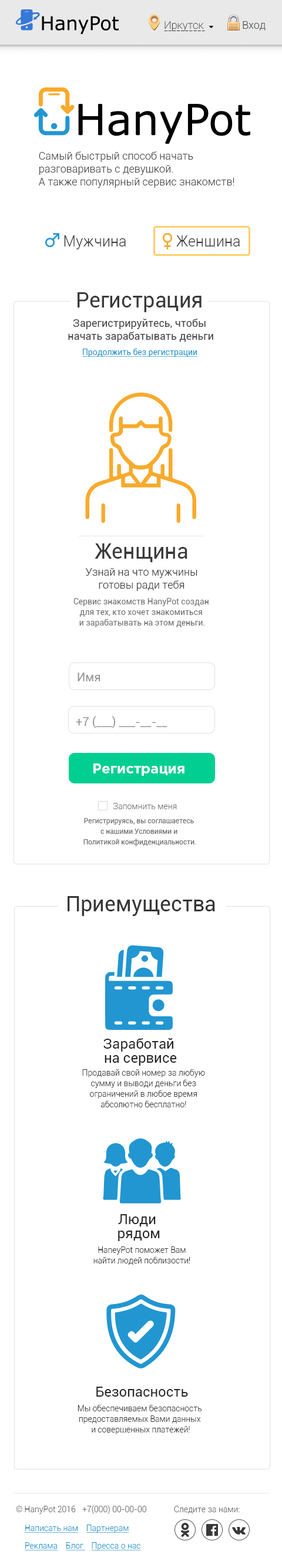
<style>
.page{position:relative;width:282px;height:1568px;background:#ffffff}
.page>*{position:absolute;margin:0}
.t1{font:10.6px/5.3px "Roboto-Thin";color:#393939}
.t2{font:10.6px "Roboto-Light";color:#525252}
.t3{font:10.6px "Roboto-Light";color:#464646}
.t4{font:14.8px "Roboto-Light";color:#3a3a3a}
.t5{font:21.1px "Roboto-Regular";color:#393939}
.t6{font:10.6px "Roboto-Regular";color:#464646}
.t7{font:8.2px "Roboto-Regular";color:#2196d1;text-decoration:underline}
.t8{font:10.6px "Roboto-Light";color:#393939}
.t9{font:8.2px/10.6px "Roboto-Regular";color:#727272}
.t10{font:11.8px "Roboto-Regular";color:#969696}
.t11{font:14.1px "GothamPro-Bold";color:#ffffff}
.t12{font:8.2px "Roboto-Light";color:#727272}
.t13{font:7px/10.6px "Roboto-Regular";color:#727272}
.t14{font:21.1px "Roboto-Regular";color:#363636}
.t15{font:14.1px/14.1px "Roboto-Regular";color:#282828}
.t16{font:8.2px/10.6px "Roboto-Light";color:#393939}
.t17{font:14.1px "Roboto-Regular";color:#282828}
.t18{font:8.2px "Roboto-Light";color:#696969}
.t19{font:8.2px/17.6px "Roboto-Light";color:#2196d1;text-decoration:underline}
.t20{font:8.2px "Roboto-Light";color:#2196d1;text-decoration:underline}
</style>
<div class="page">
<p class="t1" style="left:164px;top:21px;width:41px;height:10px">Иркутск<br>----------</p>
<p class="t2" style="left:242px;top:21px;width:23px;height:10px">Вход</p>
<p class="t3" style="left:39px;top:151px;width:195px;height:37px">Самый быстрый способ начать <br>разговаривать с девушкой. <br>А также популярный сервис знакомств!</p>
<p class="t4" style="left:64px;top:235px;width:62px;height:14px">Мужчина</p>
<p class="t4" style="left:176px;top:235px;width:63px;height:13px">Женщина</p>
<p class="t5" style="left:77px;top:292px;width:124px;height:20px">Регистрация</p>
<p class="t6" style="left:68px;top:319px;width:145px;height:23px;text-align:center">Зарегистрируйтесь, чтобы <br>начать зарабатывать деньги</p>
<p class="t7" style="left:82px;top:349px;width:115px;height:8px">Продолжить без регистрации</p>
<p class="t5" style="left:94px;top:543px;width:93px;height:19px">Женщина</p>
<p class="t8" style="left:86px;top:568px;width:111px;height:23px;text-align:center">Узнай на что мужчины<br>готовы ради тебя</p>
<p class="t9" style="left:73px;top:598px;width:135px;height:29px;text-align:center">Сервис знакомств HanyPot создан <br>для тех, кто хочет знакомиться <br>и зарабатывать на этом деньги.</p>
<p class="t10" style="left:77px;top:673px;width:23px;height:8px">Имя</p>
<p class="t10" style="left:76px;top:716px;width:91px;height:12px">+7 (___) ___-__-__</p>
<p class="t11" style="left:93px;top:763px;width:91px;height:13px">Регистрация</p>
<p class="t12" style="left:113px;top:803px;width:64px;height:6px">Запомнить меня</p>
<p class="t13" style="left:83px;top:818px;width:113px;height:28px;text-align:center">Регистрируясь, вы соглашаетесь <br>с нашими Условиями и <br>Политикой конфиденциальности.</p>
<p class="t14" style="left:67px;top:896px;width:148px;height:20px">Приемущества</p>
<p class="t15" style="left:103px;top:1038px;width:74px;height:28px;text-align:center">Заработай <br>на сервисе</p>
<p class="t16" style="left:82px;top:1069px;width:123px;height:38px;text-align:center">Продавай свой номер за любую <br>сумму и выводи деньги без <br>ограничений в любое время <br>абсолютно бесплатно!</p>
<p class="t15" style="left:118px;top:1214px;width:42px;height:27px;text-align:center">Люди <br>рядом</p>
<p class="t16" style="left:93px;top:1246px;width:97px;height:19px;text-align:center">HaneyPot поможет Вам <br>найти людей поблизости!</p>
<p class="t17" style="left:96px;top:1387px;width:92px;height:10px">Безопасность</p>
<p class="t16" style="left:77px;top:1405px;width:125px;height:29px;text-align:center">Мы обеспечиваем безопасность <br>предоставляемых Вами данных <br>и совершенных платежей!</p>
<p class="t18" style="left:16px;top:1506px;width:60px;height:8px">© HanyPot 2016</p>
<p class="t18" style="left:82px;top:1505px;width:64px;height:9px">+7(000) 00-00-00</p>
<p class="t18" style="left:174px;top:1506px;width:65px;height:8px">Следите за нами:</p>
<p class="t19" style="left:25px;top:1525px;width:116px;height:25px"><span class="t20">Написать нам    </span>Партнерам    <br>Реклама    Блог    Пресса о нас</p>
</div>
